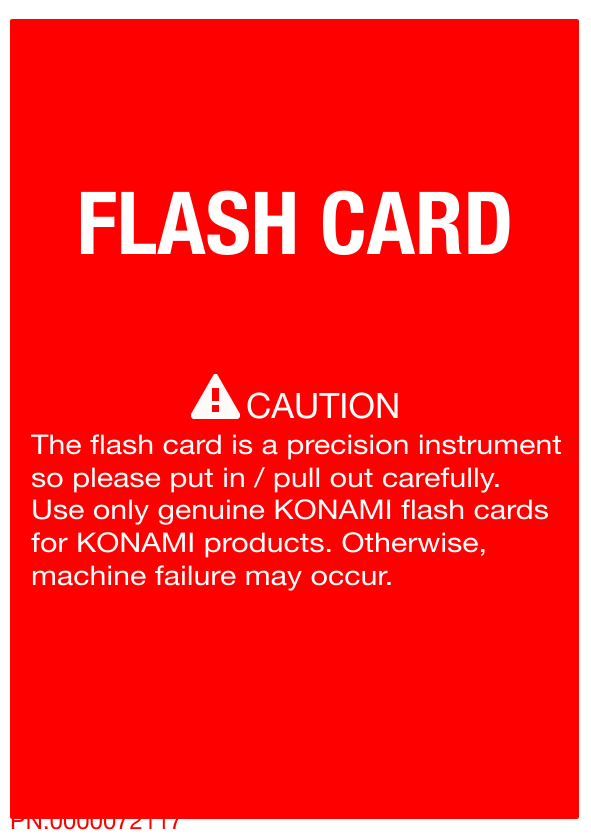
<style>
.page{position:relative;width:591px;height:839px;background:#ff0000}
.page>*{position:absolute;margin:0}
.t1{font:87px "HelveticaNeue-CondensedBold";color:#ffffff}
.t2{font:35px "HelveticaNeue";color:#ffffff}
.t3{font:27.1px "HelveticaNeue";color:#ffffff;scale:1.12 1}
.t4{font:24px "HelveticaNeue";color:#ff0000}
</style>
<div class="page">
<p class="t1" style="left:80px;top:190px;width:430px;height:65px">FLASH CARD</p>
<p class="t2" style="left:247px;top:392px;width:151px;height:27px">CAUTION</p>
<p class="t3" style="left:31px;top:434px;width:530px;height:157px">The flash card is a precision instrument<br>so please put in / pull out carefully.<br>Use only genuine KONAMI flash cards<br>for KONAMI products. Otherwise,<br>machine failure may occur.</p>
<p class="t4" style="left:11px;top:811px;width:171px;height:19px">PN.0000072117</p>
</div>
